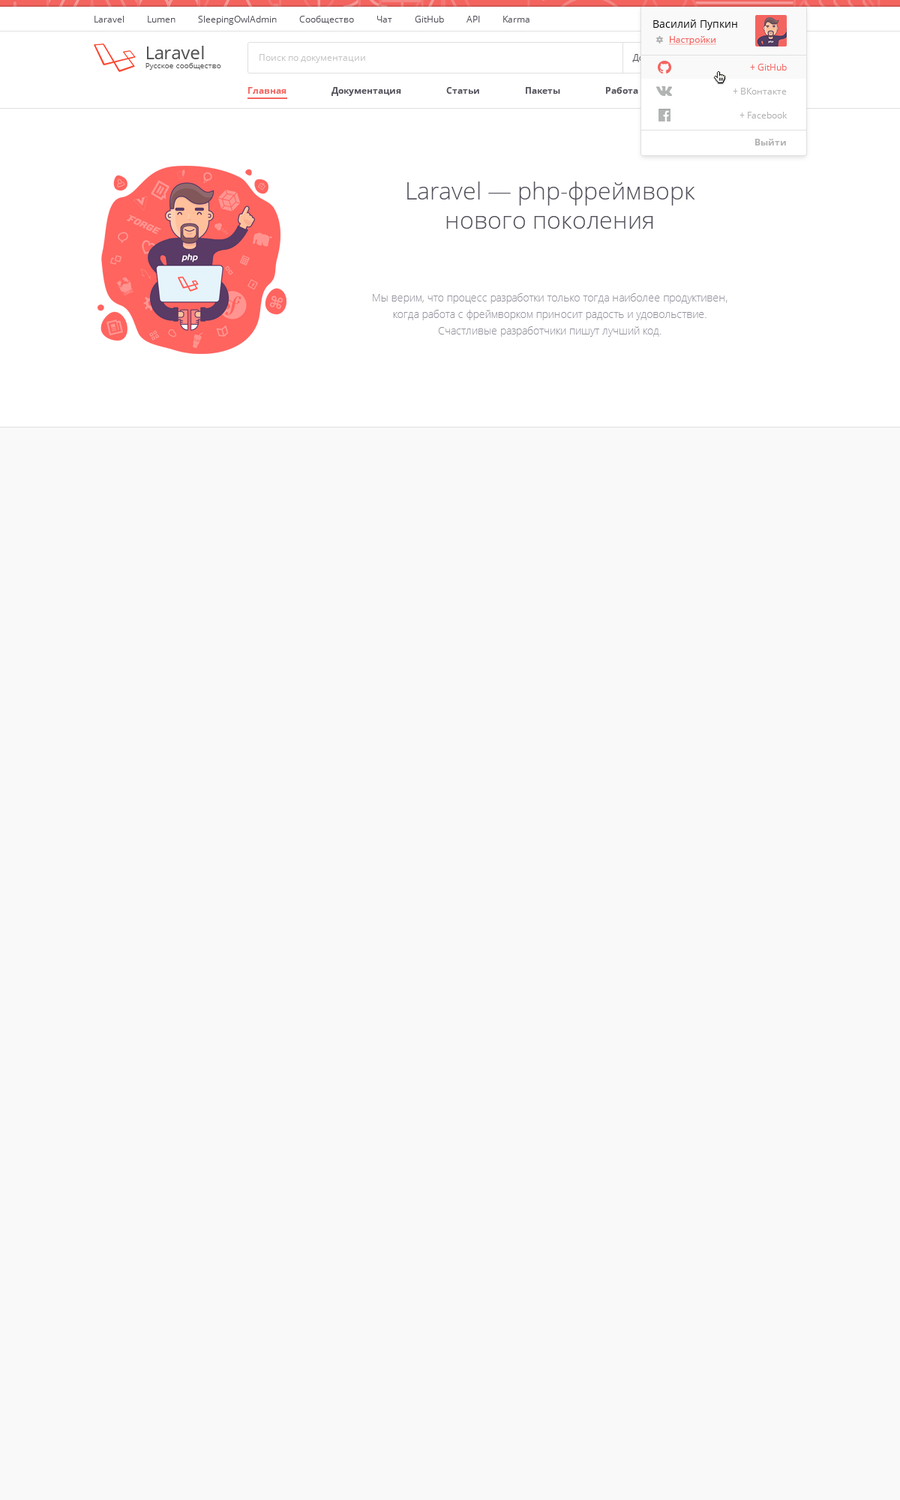
<style>
.page{position:relative;width:900px;height:1500px;background:#f9f9f9}
.page>*{position:absolute;margin:0}
.t1{font:9px "OpenSans";color:#52525c}
.t2{font:10.5px "OpenSans";color:#000000}
.t3{font:9px "OpenSans";color:#f4645f;text-decoration:underline}
.t4{font:7.5px "OpenSans";color:#525252}
.t5{font:18px "OpenSans";color:#525252}
.t6{font:9px "OpenSans";color:#c7c5c5}
.t7{font:9px "OpenSans";color:#f4645f}
.t8{font:9px "OpenSans-Bold";color:#52525c}
.t9{font:9px "OpenSans-Bold";color:#f4645f}
.t10{font:9px "OpenSans";color:#b2b4b3}
.t11{font:9px "OpenSans-Bold";color:#b2b4b3}
.t12{font:24px "OpenSans-Light";color:#52525c}
.t13{font:10.5px/16.5px "OpenSans-Light";color:#93939e}
</style>
<div class="page">
<p class="t1" style="left:95px;top:16px;width:435px;height:9px">Laravel          Lumen          SleepingOwlAdmin          Сообщество          Чат          GitHub          API          Karma</p>
<p class="t2" style="left:653px;top:20px;width:84px;height:10px">Василий Пупкин</p>
<p class="t3" style="left:669px;top:36px;width:47px;height:9px">Настройки</p>
<p class="t4" style="left:146px;top:46px;width:75px;height:24px"><span class="t5">Laravel<br></span>Русское сообщество</p>
<p class="t6" style="left:260px;top:54px;width:105px;height:9px">Поиск по документации</p>
<p class="t7" style="left:750px;top:64px;width:37px;height:7px">+ GitHub</p>
<p class="t8" style="left:248px;top:87px;width:474px;height:9px"><span class="t9">Главная</span>                    Документация                    Статьи                    Пакеты                    Работа                    Pastebin</p>
<p class="t10" style="left:733px;top:88px;width:54px;height:7px">+ ВКонтакте</p>
<p class="t10" style="left:740px;top:112px;width:47px;height:7px">+ Facebook</p>
<p class="t11" style="left:755px;top:139px;width:31px;height:7px">Выйти</p>
<p class="t12" style="left:407px;top:182px;width:288px;height:47px;text-align:center">Laravel — php-фреймворк <br>нового поколения</p>
<p class="t13" style="left:373px;top:293px;width:355px;height:44px;text-align:center">Мы верим, что процесс разработки только тогда наиболее продуктивен, когда работа с фреймворком приносит радость и удовольствие. <br>Счастливые разработчики пишут лучший код.</p>
</div>
